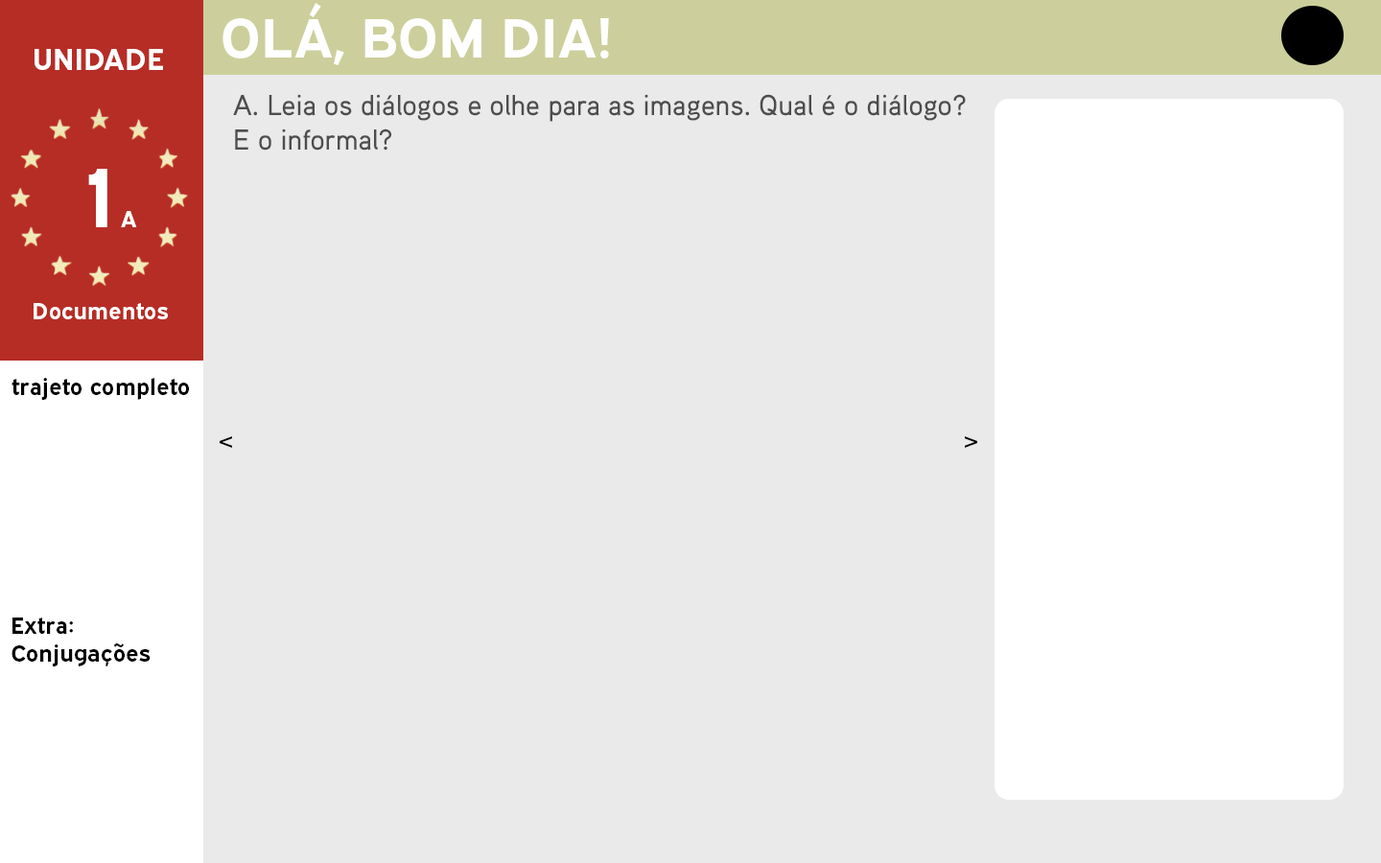
<style>
.page{position:relative;width:1381px;height:863px;background:#eaeaea}
.page>*{position:absolute;margin:0}
.t1{font:55.6px "ExpresswayRg-Bold";color:#ffffff}
.t2{font:30.2px "ExpresswayRg-Bold";color:#ffffff}
.t3{font:28.8px "AauxProMedium";color:#4d4d4d}
.t4{font:84px "ExpresswayRg-Bold";color:#ffffff}
.t5{font:23px "ExpresswayRg-Bold";color:#ffffff}
.t6{font:23px "ExpresswayRg-Bold";color:#000000}
</style>
<div class="page">
<p class="t1" style="left:223px;top:3px;width:386px;height:62px">OLÁ, BOM DIA!</p>
<p class="t2" style="left:35px;top:49px;width:128px;height:21px">UNIDADE</p>
<p class="t3" style="left:233px;top:94px;width:733px;height:57px">A. Leia os diálogos e olhe para as imagens. Qual é o diálogo?<br>E o informal?</p>
<p class="t4" style="left:88px;top:169px;width:19px;height:58px">1</p>
<p class="t5" style="left:121px;top:211px;width:16px;height:16px">A</p>
<p class="t5" style="left:34px;top:303px;width:134px;height:16px">Documentos</p>
<p class="t6" style="left:12px;top:378px;width:177px;height:22px">trajeto completo</p>
<p class="t6" style="left:220px;top:436px;width:12px;height:12px">&lt;</p>
<p class="t6" style="left:965px;top:436px;width:12px;height:12px">&gt;</p>
<p class="t6" style="left:12px;top:618px;width:139px;height:49px">Extra:<br>Conjugações</p>
</div>
